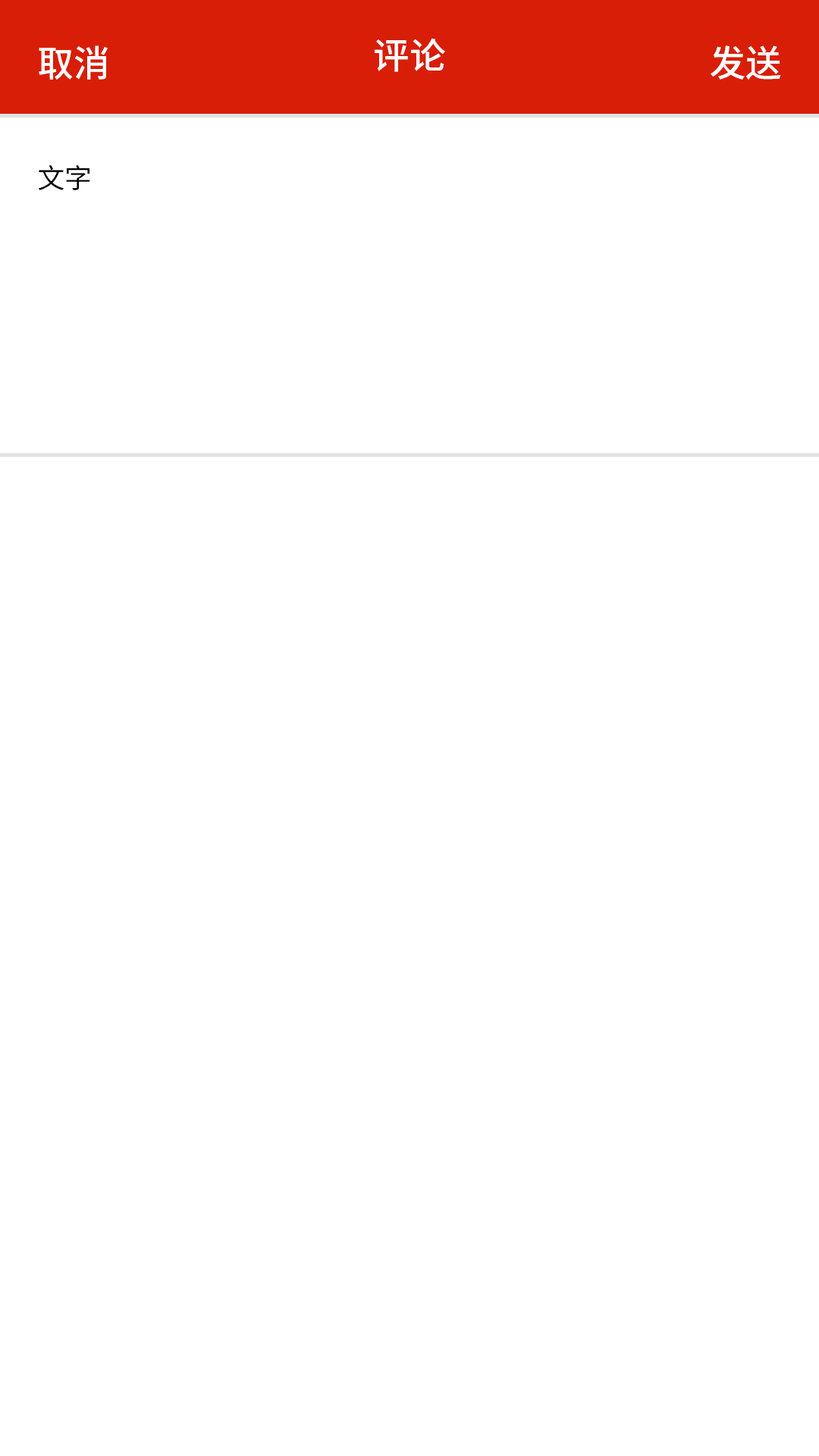
<style>
.page{position:relative;width:819px;height:1456px;background:#ffffff}
.page>*{position:absolute;margin:0}
.t1{font:36.4px "SourceHanSansCN-Medium";color:#ffffff}
.t2{font:27.3px "SourceHanSansCN-Regular";color:#000000}
</style>
<div class="page">
<p class="t1" style="left:375px;top:38px;width:70px;height:34px">评论</p>
<p class="t1" style="left:39px;top:45px;width:69px;height:35px">取消</p>
<p class="t1" style="left:711px;top:45px;width:70px;height:35px">发送</p>
<p class="t2" style="left:38px;top:165px;width:52px;height:25px">文字</p>
</div>
